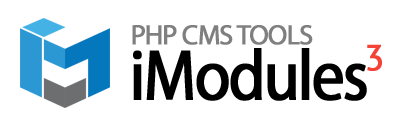
<style>
.page{position:relative;width:400px;height:120px;background:#ffffff}
.page>*{position:absolute;margin:0}
.t1{font:28px "MyriadPro-Regular";letter-spacing:-0.05em;color:#7f7f7f;font-weight:bold}
.t2{font:72px "MyriadPro-Regular";letter-spacing:-0.05em;color:#000000;font-weight:bold;scale:0.9 1}
.t3{font:36px "PTSans-Regular";letter-spacing:-0.05em;color:#f44336;font-weight:bold}
</style>
<div class="page">
<p class="t1" style="left:132px;top:25px;width:181px;height:20px">PHP CMS TOOLS</p>
<p class="t2" style="left:133px;top:48px;width:234px;height:53px">iModules</p>
<p class="t3" style="left:367px;top:44px;width:15px;height:27px">3</p>
</div>
